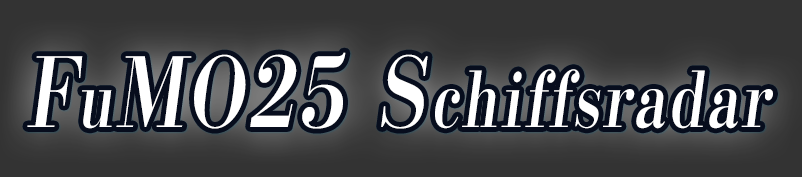
<style>
.page{position:relative;width:802px;height:177px;background:#333333}
.page>*{position:absolute;margin:0}
.t1{font:76.8px "KochoStd-Heavy";letter-spacing:0.06em;color:#ffffff;font-style:italic;scale:0.75 1}
.t2{font:96px "KochoStd-Heavy";letter-spacing:0.06em;color:#ffffff;font-style:italic;scale:0.75 1}
</style>
<div class="page">
<p class="t1" style="left:27px;top:52px;width:746px;height:77px"><span class="t2">F</span>u<span class="t2">MO25 S</span>chiffsradar</p>
</div>
